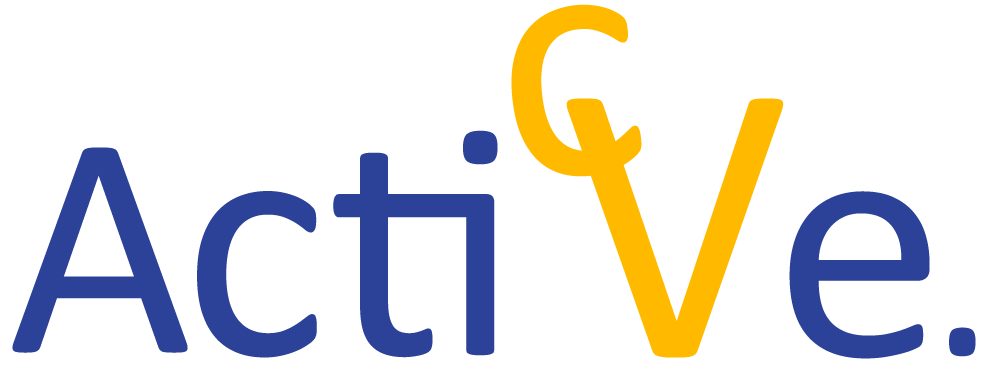
<style>
.page{position:relative;width:994px;height:366px;background:#ffffff}
.page>*{position:absolute;margin:0}
.t1{font:354.4px "Calibri";color:#ffba00}
.t2{font:406px "Calibri";color:#ffba00}
.t3{font:344.6px "Calibri";color:#2c4298}
.t4{font:321.4px "Calibri";color:#2c4298}
.t5{font:345.5px "Calibri";color:#2c4298}
.t6{font:250px "Calibri";color:#2c4298}
</style>
<div class="page">
<p class="t1" style="left:511px;top:4px;width:131px;height:173px;rotate:-7deg">c</p>
<p class="t2" style="left:566px;top:98px;width:218px;height:260px">V</p>
<p class="t3" style="left:197px;top:130px;width:301px;height:228px">cti</p>
<p class="t4" style="left:12px;top:147px;width:176px;height:206px">A</p>
<p class="t5" style="left:789px;top:191px;width:141px;height:168px">e</p>
<p class="t6" style="left:949px;top:327px;width:27px;height:30px">.</p>
</div>
